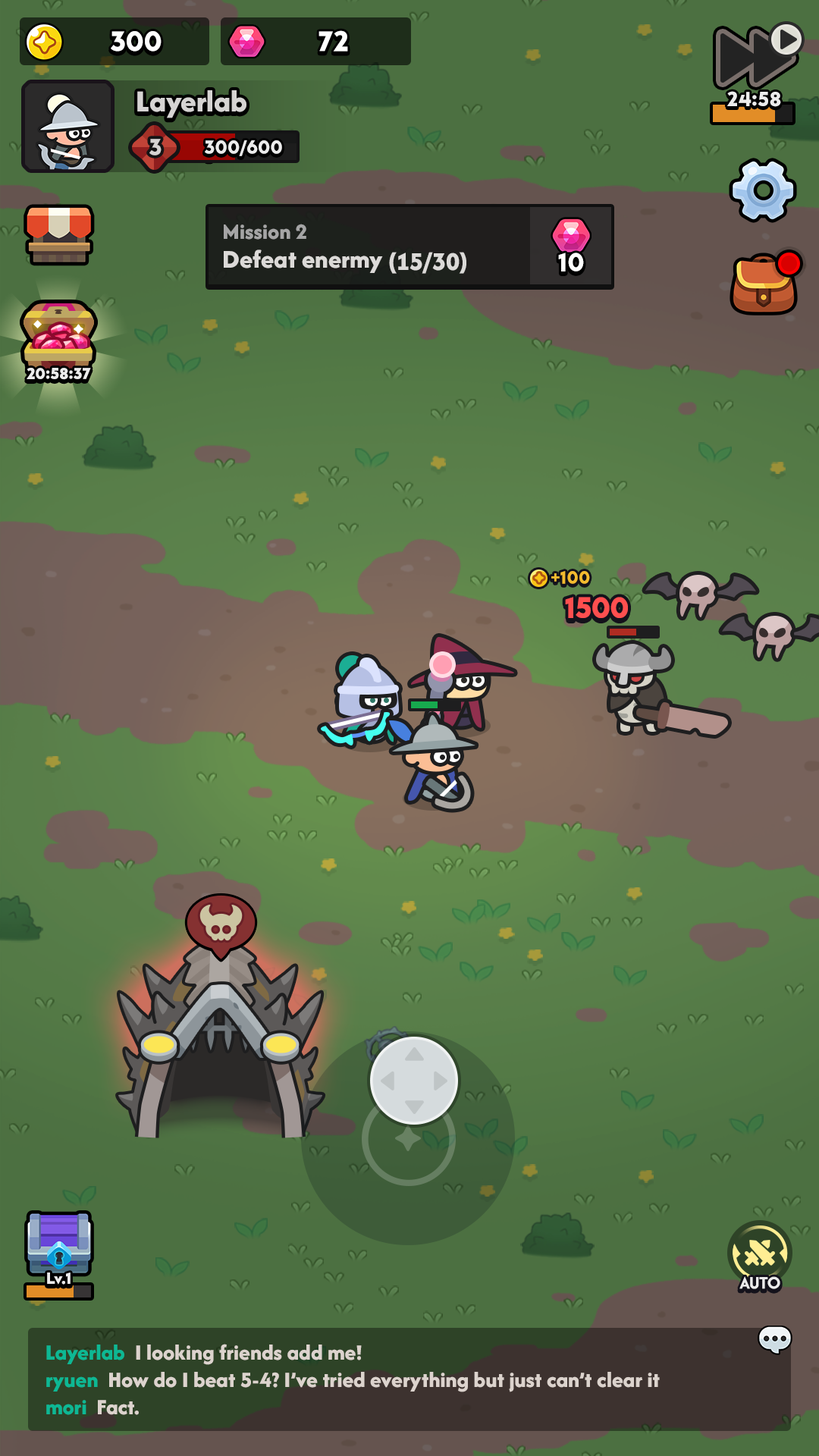
<style>
.page{position:relative;width:819px;height:1456px}
.page>*{position:absolute;margin:0}
.t1{font:29.6px "LTAvocado-Bold";color:#ffffff}
.t2{font:31.8px "AfacadFlux-ExtraBold";color:#d6d4d3}
.t3{font:21.2px "LTAvocado-Bold";color:#ececec}
.t4{font:24.3px "LTAvocado-Bold";color:#d6d4d3;text-transform:uppercase}
.t5{font:19.7px "LTAvocado-Bold";color:#ececec}
.t6{font:22.7px "AfacadFlux-ExtraBold";color:#a5a5a5}
.t7{font:26.5px "AfacadFlux-ExtraBold";color:#dcdad8}
.t8{font:27.3px "LTAvocado-Bold";color:#ffffff}
.t9{font:16.4px "LTAvocado-Bold";color:#ececec}
.t10{font:18.6px "LTAvocado-Bold";color:#f4bb2f}
.t11{font:30.6px "LTAvocado-Bold";letter-spacing:-0.025em;color:#ff4f4f}
.t12{font:18.2px "AfacadFlux-Bold";letter-spacing:-0.01em;color:#ececec;text-transform:uppercase}
.t13{font:22.7px "AfacadFlux-ExtraBold";letter-spacing:0.005em;color:#dcd3cd}
.t14{font:22.7px "AfacadFlux-ExtraBold";letter-spacing:0.005em;color:#0db894}
</style>
<div class="page">
<p class="t1" style="left:111px;top:31px;width:51px;height:21px">300</p>
<p class="t1" style="left:318px;top:30px;width:30px;height:22px">72</p>
<p class="t2" style="left:137px;top:90px;width:109px;height:28px">Layerlab</p>
<p class="t3" style="left:726px;top:91px;width:55px;height:16px">24:58</p>
<p class="t4" style="left:149px;top:139px;width:13px;height:16px">3</p>
<p class="t5" style="left:205px;top:140px;width:77px;height:16px">300/600</p>
<p class="t6" style="left:224px;top:224px;width:82px;height:16px">Mission 2</p>
<p class="t7" style="left:224px;top:249px;width:242px;height:25px">Defeat enermy (15/30)</p>
<p class="t8" style="left:558px;top:253px;width:26px;height:18px">10</p>
<p class="t9" style="left:27px;top:368px;width:64px;height:12px">20:58:37</p>
<p class="t10" style="left:551px;top:571px;width:39px;height:13px">+100</p>
<p class="t11" style="left:565px;top:597px;width:63px;height:21px">1500</p>
<p class="t9" style="left:47px;top:1272px;width:24px;height:13px">Lv.1</p>
<p class="t12" style="left:739px;top:1276px;width:41px;height:13px">Auto</p>
<p class="t13" style="left:46px;top:1344px;width:614px;height:71px"><span class="t14">Layerlab  </span>I looking friends add me!<br><span class="t14">ryuen  </span>How do I beat 5-4? I’ve tried everything but just can’t clear it<br><span class="t14">mori  </span>Fact.</p>
</div>
